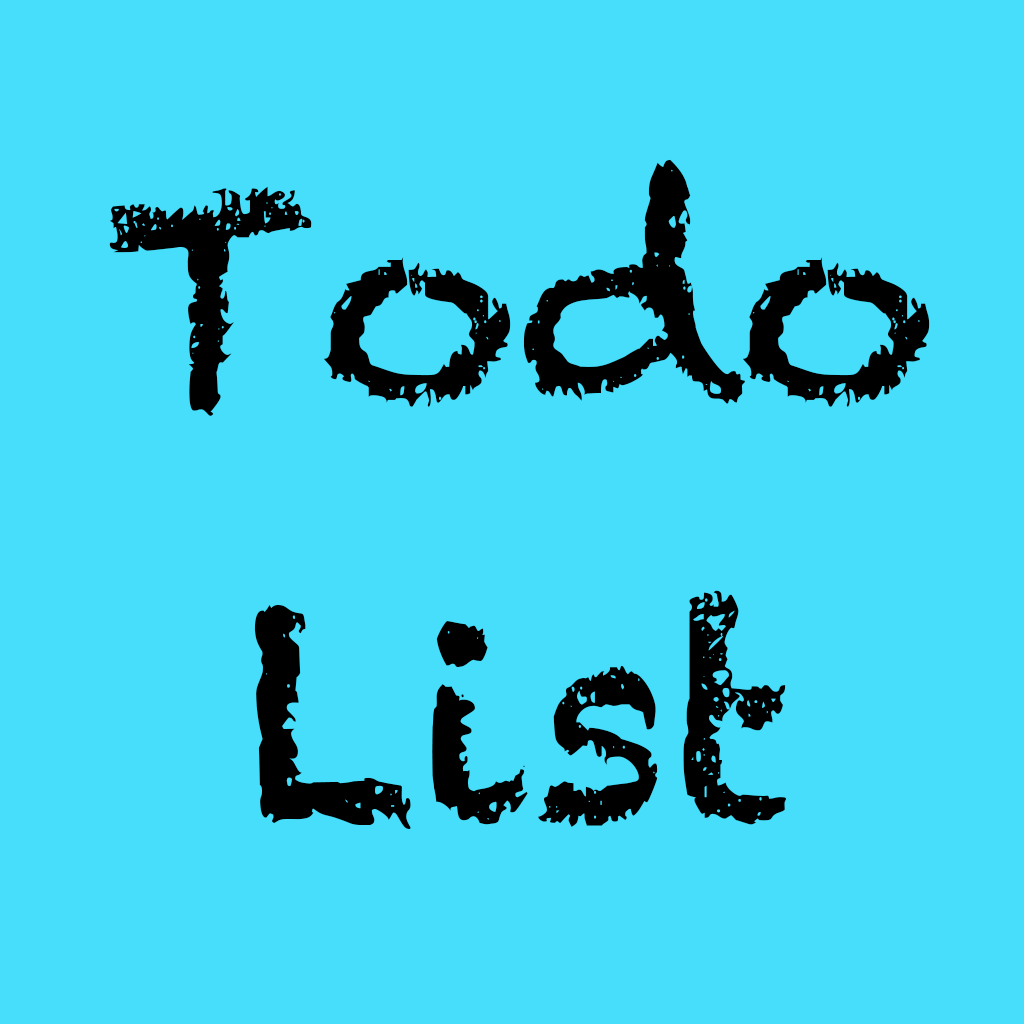
<style>
.page{position:relative;width:1024px;height:1024px;background:#46defa}
.page>*{position:absolute;margin:0}
.t1{font:280px "Chalkduster";color:#000000}
</style>
<div class="page">
<p class="t1" style="left:109px;top:159px;width:821px;height:257px">Todo</p>
<p class="t1" style="left:254px;top:590px;width:533px;height:239px">List</p>
</div>
